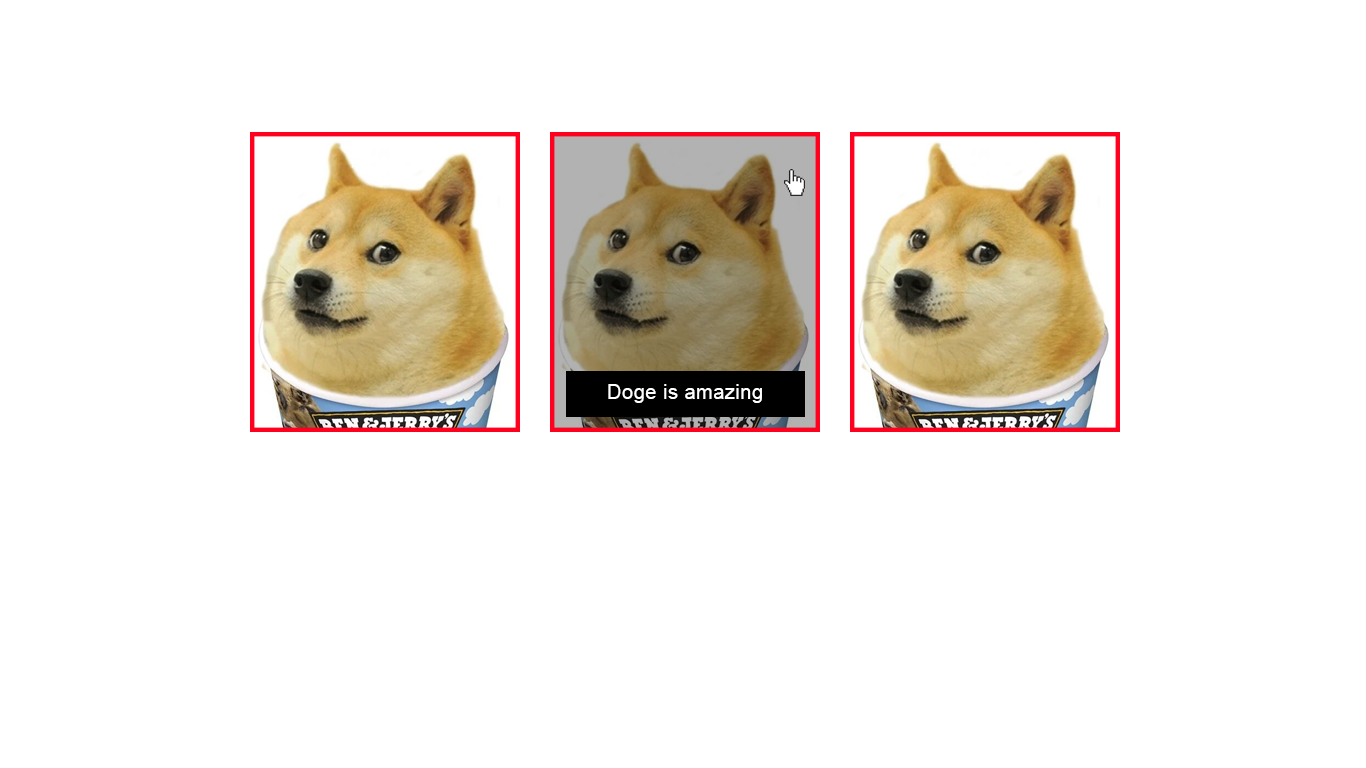
<style>
.page{position:relative;width:1366px;height:768px;background:#ffffff}
.page>*{position:absolute;margin:0}
.t1{font:20px "ArialMT";letter-spacing:0.025em;color:#ffffff}
</style>
<div class="page">
<p class="t1" style="left:608px;top:384px;width:154px;height:19px">Doge is amazing</p>
</div>
